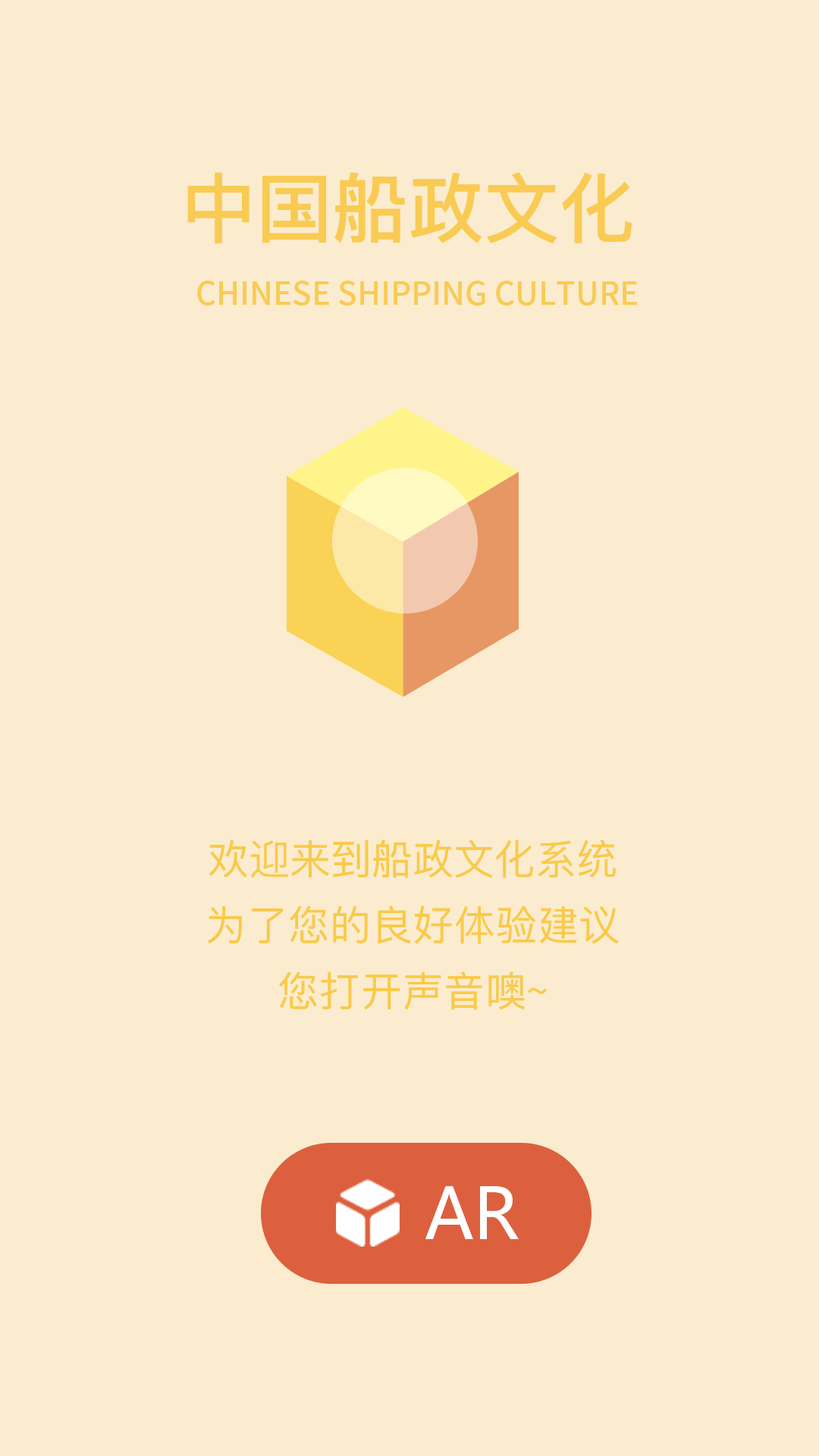
<style>
.page{position:relative;width:819px;height:1456px;background:#fbeccf}
.page>*{position:absolute;margin:0}
.t1{font:75.8px "PingFang-SC-Bold";color:#f9cb53}
.t2{font:31.8px "NotoSansHans-Medium";color:#f9cb53}
.t3{font:40.9px/66px "PingFang-SC-Medium";color:#f9ca49}
.t4{font:69.7px "MicrosoftYaHei";color:#ffffff}
</style>
<div class="page">
<p class="t1" style="left:187px;top:172px;width:445px;height:71px">中国船政文化</p>
<p class="t2" style="left:197px;top:281px;width:440px;height:25px">CHINESE SHIPPING CULTURE</p>
<p class="t3" style="left:207px;top:839px;width:412px;height:171px;text-align:center">欢迎来到船政文化系统<br>为了您的良好体验建议您打开声音噢~</p>
<p class="t4" style="left:425px;top:1186px;width:94px;height:53px">AR</p>
</div>
